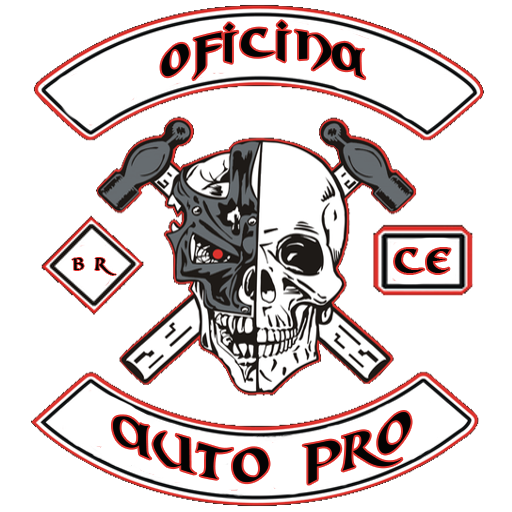
<style>
.page{position:relative;width:512px;height:512px;background:#ffffff}
.page>*{position:absolute;margin:0}
.t1{font:43.9px "Mael";letter-spacing:0.105em;color:#030303}
.t2{font:38px "Mael";letter-spacing:0.105em;color:#030303}
.t3{font:18px "Mael";letter-spacing:0.105em;color:#030303}
.t4{font:52px "Mael";letter-spacing:0.105em;color:#030303}
</style>
<div class="page">
<p class="t1" style="left:161px;top:21px;width:204px;height:59px">OFICINA</p>
<p class="t2" style="left:395px;top:249px;width:55px;height:24px">ce</p>
<p class="t3" style="left:72px;top:258px;width:44px;height:17px">B R</p>
<p class="t4" style="left:113px;top:412px;width:298px;height:72px">AUTO PRO</p>
</div>
